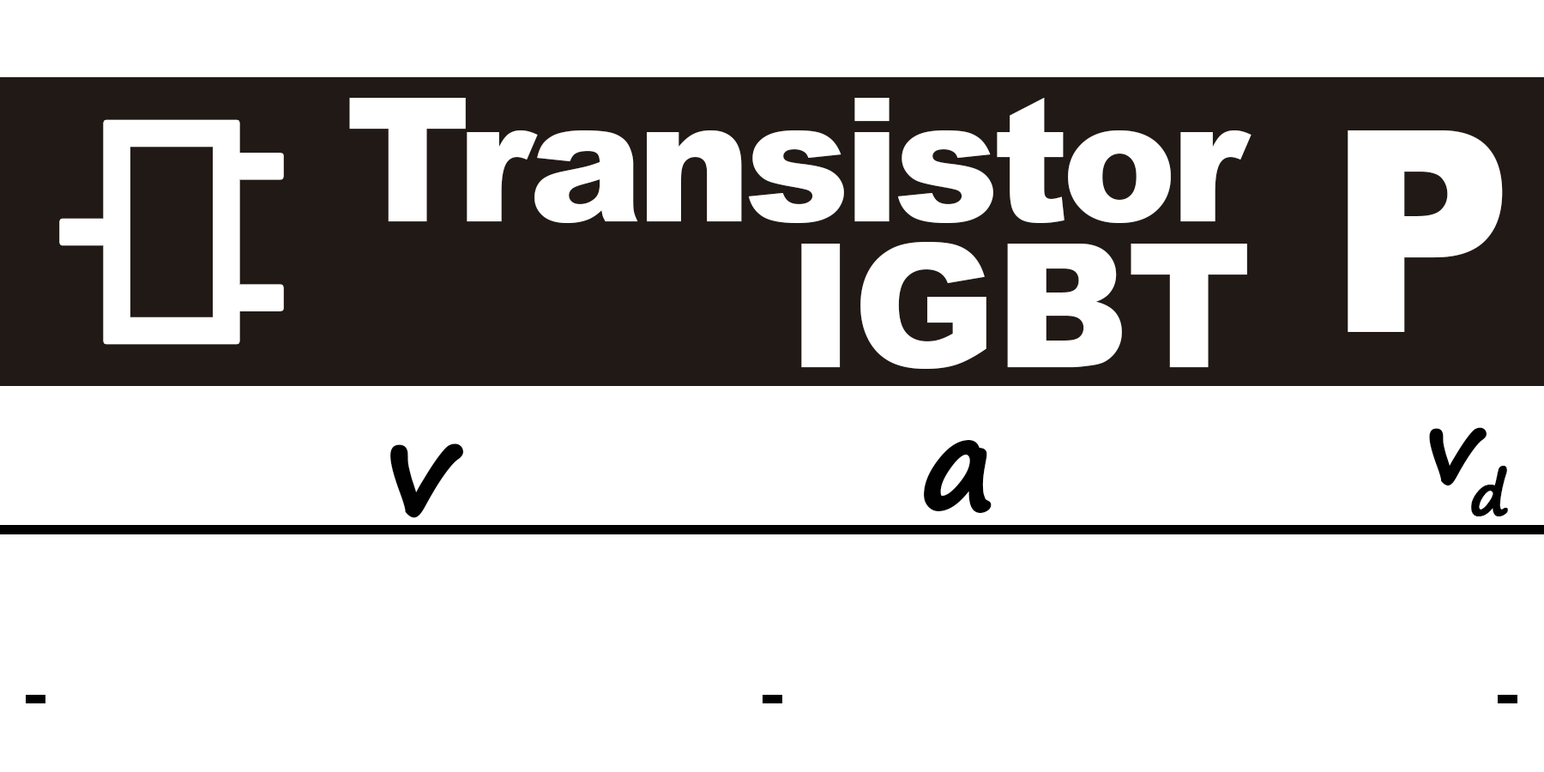
<style>
.page{position:relative;width:1544px;height:772px;background:#ffffff}
.page>*{position:absolute;margin:0}
.t1{font:172.5px/145.3px "Arial-Black";letter-spacing:-0.04em;color:#ffffff}
.t2{font:172.5px/145.3px "Arial-Black";letter-spacing:-0.01em;color:#ffffff}
.t3{font:281.5px "Arial-Black";letter-spacing:-0.01em;color:#ffffff;scale:0.9 1}
.t4{font:99.9px "SegoePrint-Bold";letter-spacing:-0.15em;color:#010101;font-weight:bold}
.t5{font:127.1px "Arial-BoldMT";letter-spacing:-0.15em;color:#010101}
.t6{font:127.1px "SegoePrint-Bold";letter-spacing:-0.01em;color:#010101;font-weight:bold}
.t7{font:127.1px "Arial-BoldMT";letter-spacing:-0.01em;color:#010101}
</style>
<div class="page">
<p class="t1" style="left:349px;top:98px;width:903px;height:271px;text-align:right">Transistor<br><span class="t2">IGBT</span></p>
<p class="t3" style="left:1348px;top:130px;width:155px;height:202px">P</p>
<p class="t4" style="left:1429px;top:427px;width:79px;height:89px"><span class="t5"> </span>vd</p>
<p class="t6" style="left:390px;top:444px;width:74px;height:74px">v</p>
<p class="t6" style="left:924px;top:439px;width:68px;height:75px"><span class="t7">   </span>a</p>
</div>
